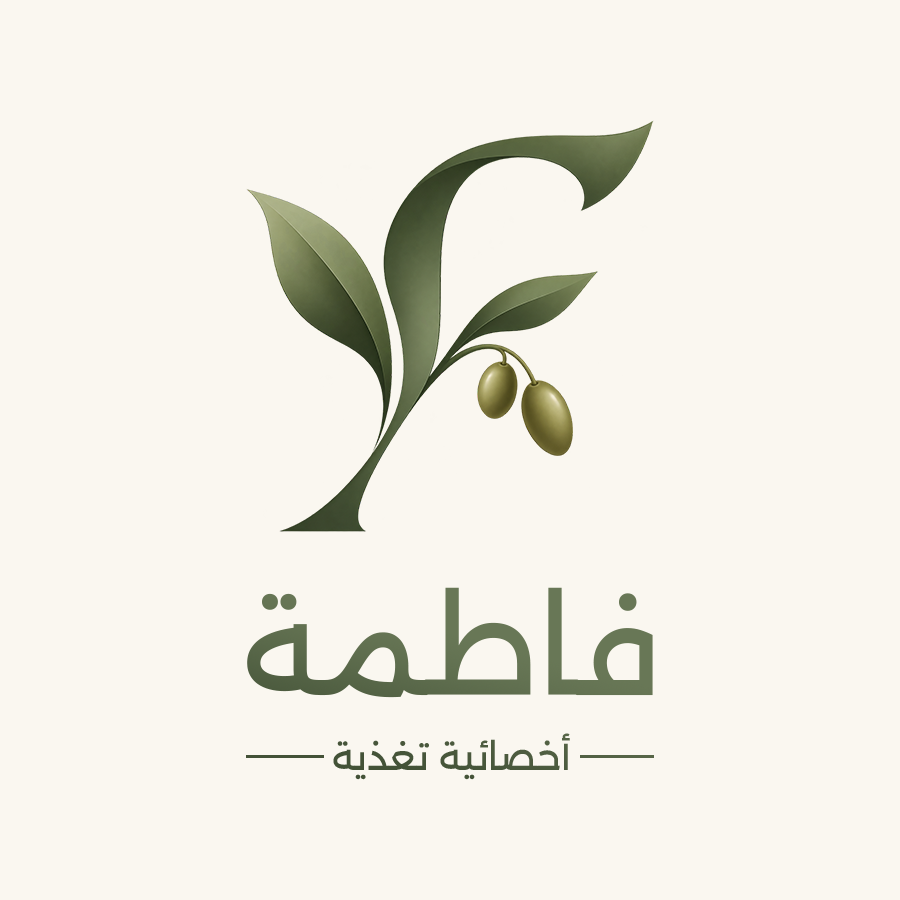
<style>
.page{position:relative;width:900px;height:900px;background:#faf7f0}
.page>*{position:absolute;margin:0}
.t1{font:130.2px "Alexandria-Regular";color:#637252}
.t2{font:37px "Alexandria-Regular";color:#435237}
</style>
<div class="page">
<p class="t1" style="left:247px;top:587px;width:406px;height:111px">فاطمة</p>
<p class="t2" style="left:333px;top:733px;width:237px;height:47px">أخصائية تغذية</p>
</div>
